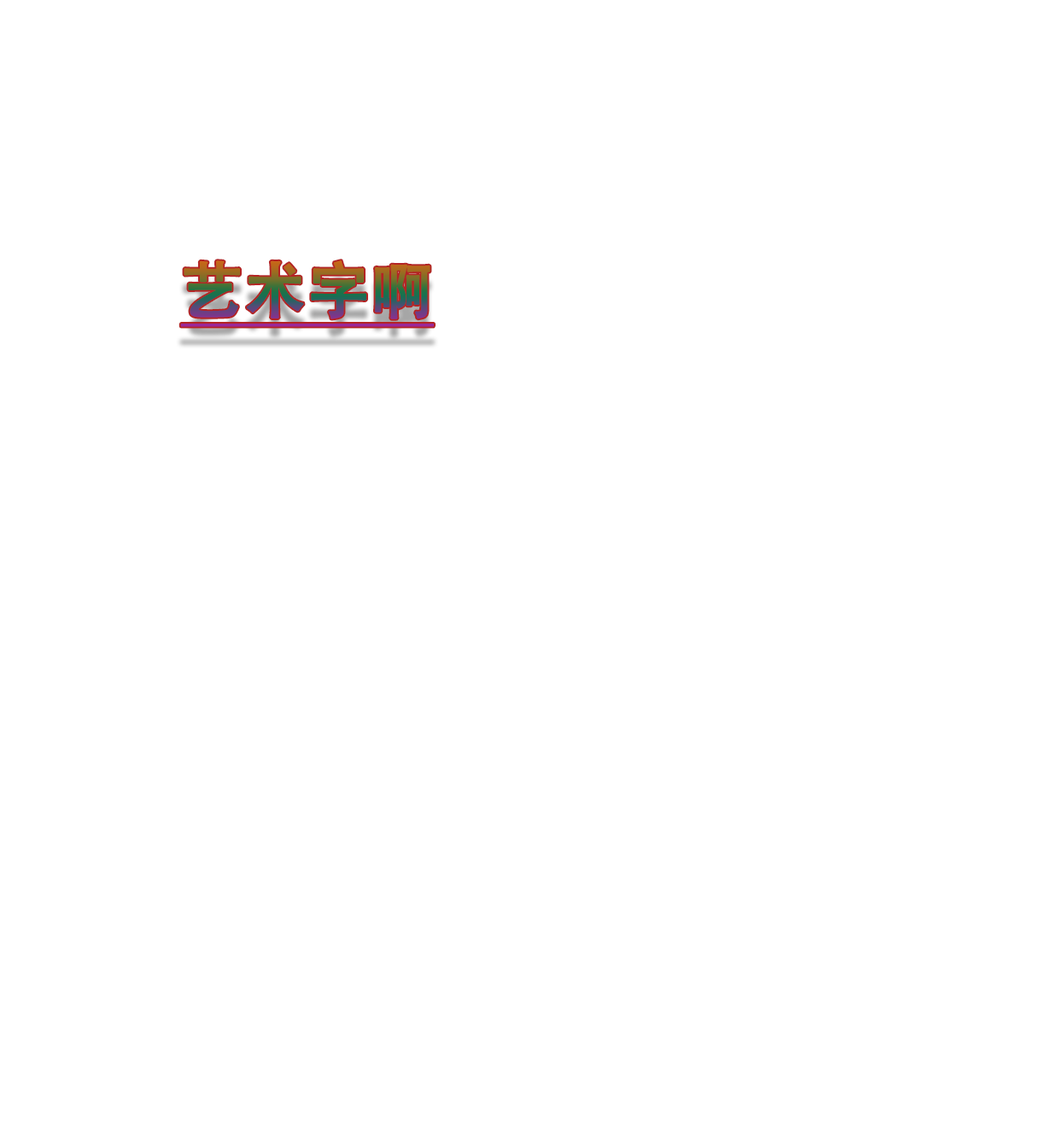
<style>
.page{position:relative;width:1047px;height:1139px;background:#ffffff}
.page>*{position:absolute;margin:0}
.t1{font:61.5px "AdobeHeitiStd-Regular";font-weight:bold;text-decoration:underline}
</style>
<div class="page">
<p class="t1" style="left:180px;top:260px;width:254px;height:67px">艺术字啊</p>
</div>
